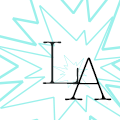
<style>
.page{position:relative;width:120px;height:120px;background:#ffffff}
.page>*{position:absolute;margin:0}
.t1{font:63.4px "AmericanTypewriter-Light";letter-spacing:0.025em;color:#1c2222}
.t2{font:63.4px "AmericanTypewriter-Light";letter-spacing:0.025em;color:#000000}
</style>
<div class="page">
<p class="t1" style="left:42px;top:41px;width:37px;height:44px">L</p>
<p class="t2" style="left:65px;top:57px;width:47px;height:44px">A</p>
</div>
